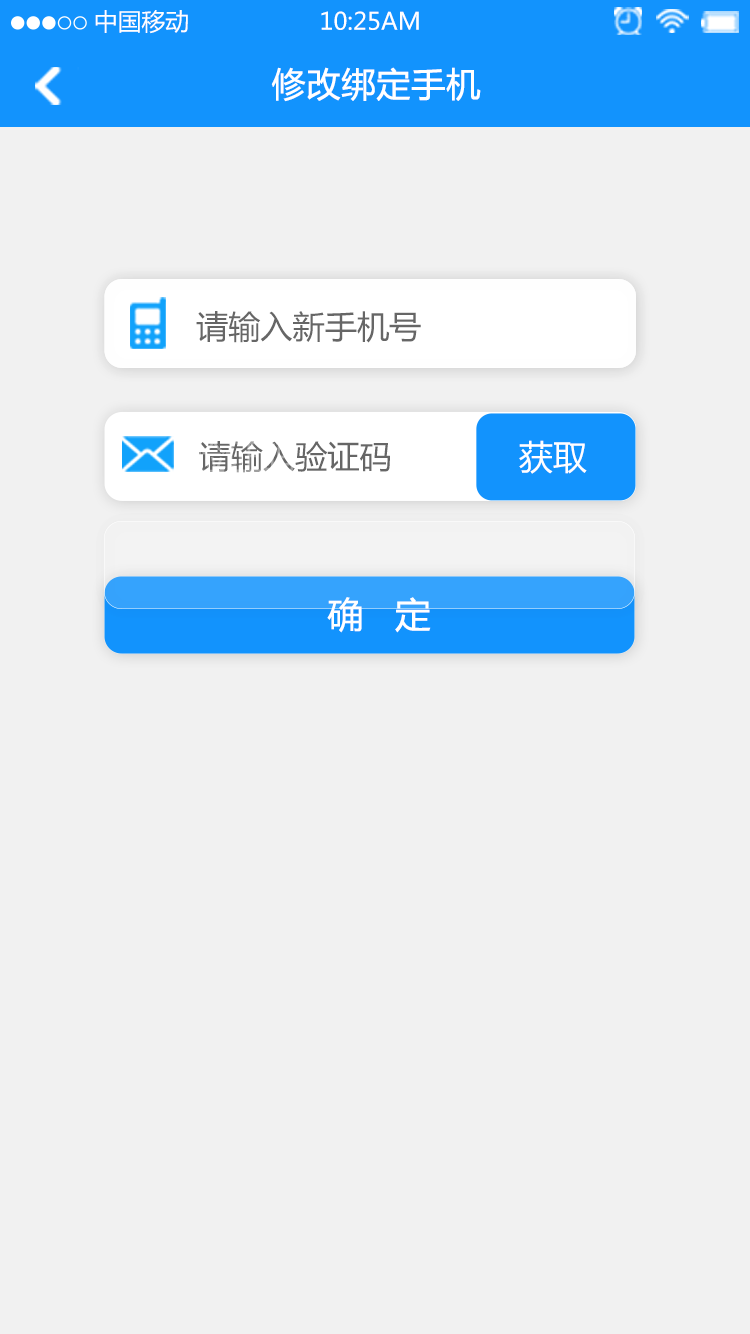
<style>
.page{position:relative;width:750px;height:1334px;background:#f1f1f1}
.page>*{position:absolute;margin:0}
.t1{font:23.8px "MicrosoftYaHei";color:#ffffff}
.t2{font:34px "MicrosoftYaHei";color:#ffffff;font-weight:bold}
.t3{font:32.1px "MicrosoftYaHei";color:#666666}
.t4{font:34px "MicrosoftYaHei";color:#ffffff}
.t5{font:35.7px "MicrosoftYaHei";color:#ffffff}
</style>
<div class="page">
<p class="t1" style="left:95px;top:10px;width:93px;height:24px">中国移动</p>
<p class="t1" style="left:321px;top:11px;width:98px;height:19px">10:25AM</p>
<p class="t2" style="left:271px;top:67px;width:210px;height:35px">修改绑定手机</p>
<p class="t3" style="left:196px;top:311px;width:225px;height:32px">请输入新手机号</p>
<p class="t3" style="left:199px;top:441px;width:191px;height:32px">请输入验证码</p>
<p class="t4" style="left:519px;top:440px;width:68px;height:34px">获取</p>
<p class="t5" style="left:327px;top:597px;width:104px;height:36px">确   定</p>
</div>
